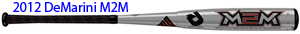
<style>
.page{position:relative;width:300px;height:34px;background:#ffffff}
.page>*{position:absolute;margin:0}
.t1{font:14px "MyriadPro-Regular";color:#0000ff}
</style>
<div class="page">
<p class="t1" style="left:13px;top:2px;width:115px;height:10px">2012 DeMarini M2M</p>
</div>
